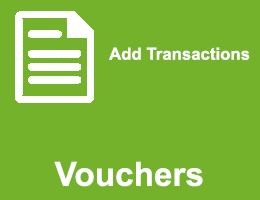
<style>
.page{position:relative;width:260px;height:200px;background:#73b22a}
.page>*{position:absolute;margin:0}
.t1{font:16.8px "Arial-BoldMT";color:#ffffff}
.t2{font:33.3px "Arial-BoldMT";color:#ffffff}
</style>
<div class="page">
<p class="t1" style="left:109px;top:47px;width:141px;height:13px">Add Transactions</p>
<p class="t2" style="left:54px;top:161px;width:149px;height:26px">Vouchers</p>
</div>
